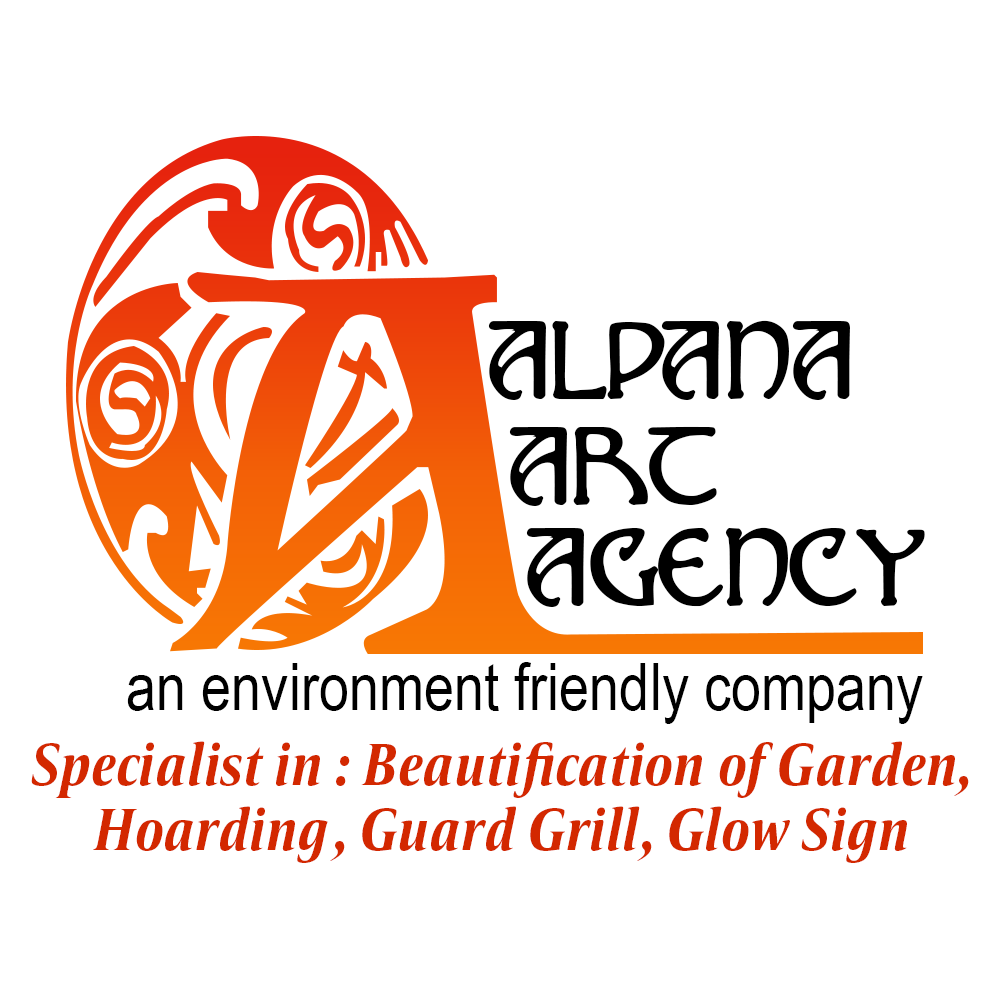
<style>
.page{position:relative;width:1000px;height:1000px;background:#ffffff}
.page>*{position:absolute;margin:0}
.t1{font:102px "NomarchDemo";color:#000000}
.t2{font:66px "ArialNarrow";color:#000000}
.t3{font:61px/65px "Candide-CondensedBoldItalic";color:#d32800}
</style>
<div class="page">
<p class="t1" style="left:488px;top:320px;width:362px;height:80px">ALPANA</p>
<p class="t1" style="left:509px;top:426px;width:208px;height:80px">ART</p>
<p class="t1" style="left:526px;top:527px;width:399px;height:80px">AGENCY</p>
<p class="t2" style="left:127px;top:662px;width:796px;height:62px">an environment friendly company</p>
<p class="t3" style="left:31px;top:741px;width:938px;height:122px;text-align:center">Specialist in : Beautification of Garden,<br>Hoarding, Guard Grill, Glow Sign</p>
</div>
